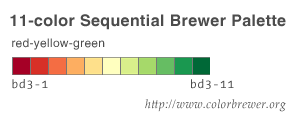
<style>
.page{position:relative;width:297px;height:127px;background:#ffffff}
.page>*{position:absolute;margin:0}
.t1{font:16px "HelveticaLT-Bold";letter-spacing:0.025em;color:#4c4c4c}
.t2{font:12px "HelveticaLT";letter-spacing:0.025em;color:#4c4c4c}
.t3{font:12px "TheSansMono-Plain";letter-spacing:0.025em;color:#4c4c4c}
.t4{font:12px "PalatinoLinotype-Italic";letter-spacing:0.025em;color:#4c4c4c}
</style>
<div class="page">
<p class="t1" style="left:10px;top:14px;width:276px;height:16px">11-color Sequential Brewer Palette</p>
<p class="t2" style="left:12px;top:38px;width:93px;height:12px">red-yellow-green</p>
<p class="t3" style="left:12px;top:79px;width:36px;height:10px">bd3-1</p>
<p class="t3" style="left:191px;top:79px;width:43px;height:10px">bd3-11</p>
<p class="t4" style="left:145px;top:99px;width:141px;height:13px">http://www.colorbrewer.org</p>
</div>
